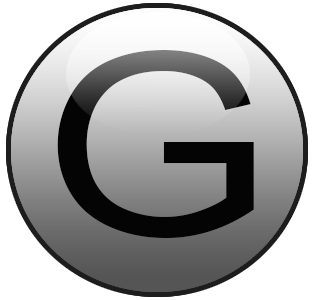
<style>
.page{position:relative;width:316px;height:300px;background:#ffffff}
.page>*{position:absolute;margin:0}
.t1{font:254px "ArialMT";color:#040404;scale:1.17 1}
</style>
<div class="page">
<p class="t1" style="left:57px;top:50px;width:197px;height:188px">G</p>
</div>
